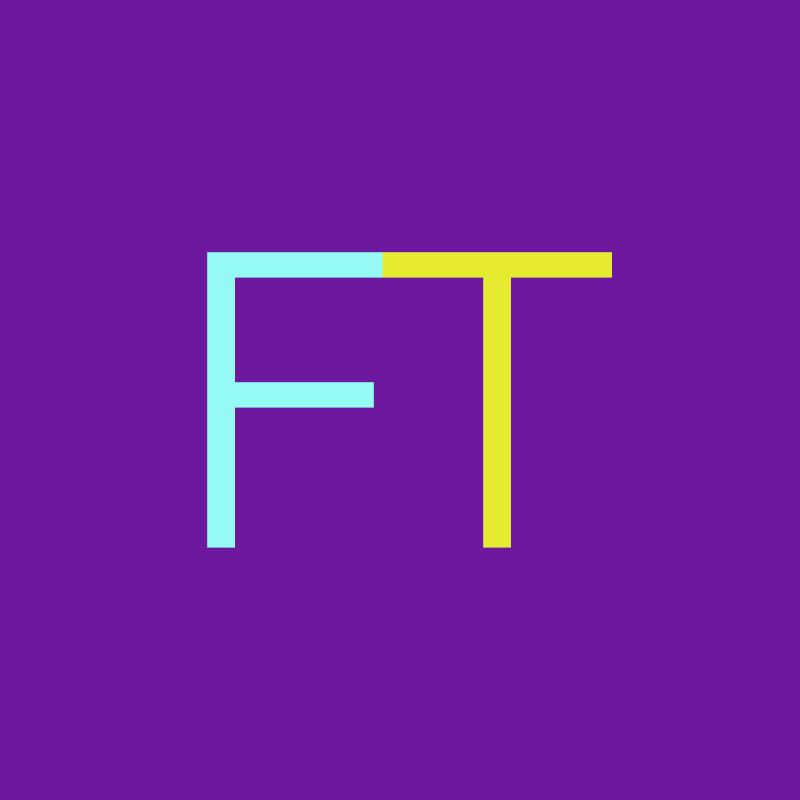
<style>
.page{position:relative;width:800px;height:800px;background:#6e189f}
.page>*{position:absolute;margin:0}
.t1{font:416.7px "Avenir-Light";letter-spacing:-0.05em;color:#95faf6}
.t2{font:416.7px "Avenir-Light";letter-spacing:-0.05em;color:#e5ec30}
</style>
<div class="page">
<p class="t1" style="left:207px;top:252px;width:405px;height:296px">F<span class="t2">T</span></p>
</div>
